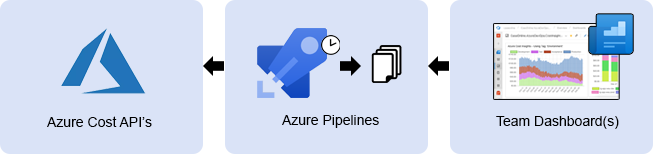
<style>
.page{position:relative;width:653px;height:154px;background:#dae3f7}
.page>*{position:absolute;margin:0}
.t1{font:14px "ArialMT";color:#000000}
</style>
<div class="page">
<p class="t1" style="left:47px;top:116px;width:105px;height:11px">Azure Cost API’s</p>
<p class="t1" style="left:282px;top:115px;width:97px;height:13px">Azure Pipelines</p>
<p class="t1" style="left:496px;top:116px;width:123px;height:13px">Team Dashboard(s)</p>
</div>
